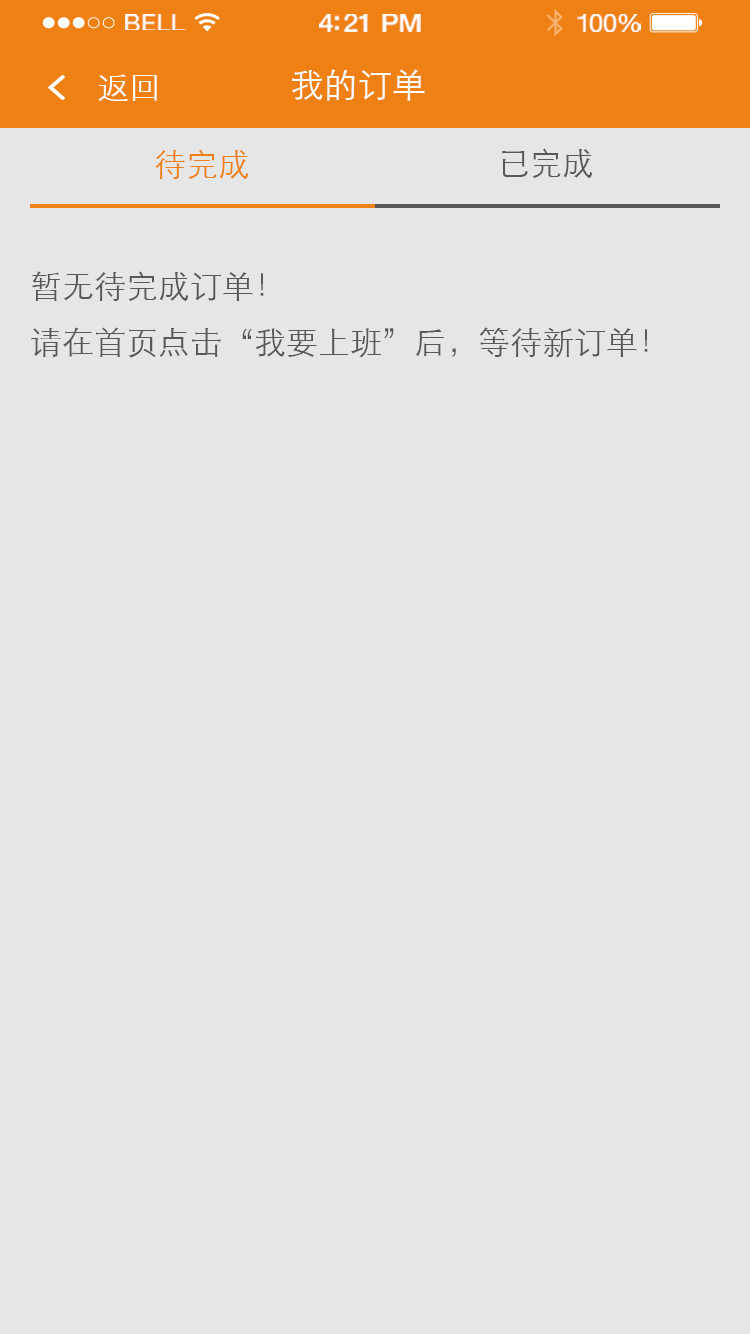
<style>
.page{position:relative;width:750px;height:1334px;background:#e6e6e6}
.page>*{position:absolute;margin:0}
.t1{font:23.3px "HelveticaNeue";letter-spacing:0.02em;color:#ffffff;scale:1.06 1}
.t2{font:25.3px "HelveticaNeue-Medium";letter-spacing:-0.02em;color:#ffffff;scale:1.06 1}
.t3{font:24.3px "HelveticaNeue";letter-spacing:-0.02em;color:#ffffff;scale:1.06 1}
.t4{font:32px "STXihei";color:#ffffff}
.t5{font:34px "STXihei";color:#ffffff}
.t6{font:32px "STXihei";color:#ef8014}
.t7{font:32px "STXihei";color:#595757}
.t8{font:32px/56px "STXihei";color:#595757}
</style>
<div class="page">
<p class="t1" style="left:125px;top:14px;width:61px;height:16px">BELL</p>
<p class="t2" style="left:319px;top:14px;width:102px;height:18px">4:21 PM</p>
<p class="t3" style="left:577px;top:14px;width:64px;height:18px">100%</p>
<p class="t4" style="left:98px;top:74px;width:59px;height:27px">返回</p>
<p class="t5" style="left:292px;top:69px;width:133px;height:32px">我的订单</p>
<p class="t6" style="left:155px;top:149px;width:94px;height:30px">待完成</p>
<p class="t7" style="left:502px;top:148px;width:91px;height:30px">已完成</p>
<p class="t8" style="left:31px;top:271px;width:617px;height:87px">暂无待完成订单！<br>请在首页点击“我要上班”后，等待新订单！</p>
</div>
